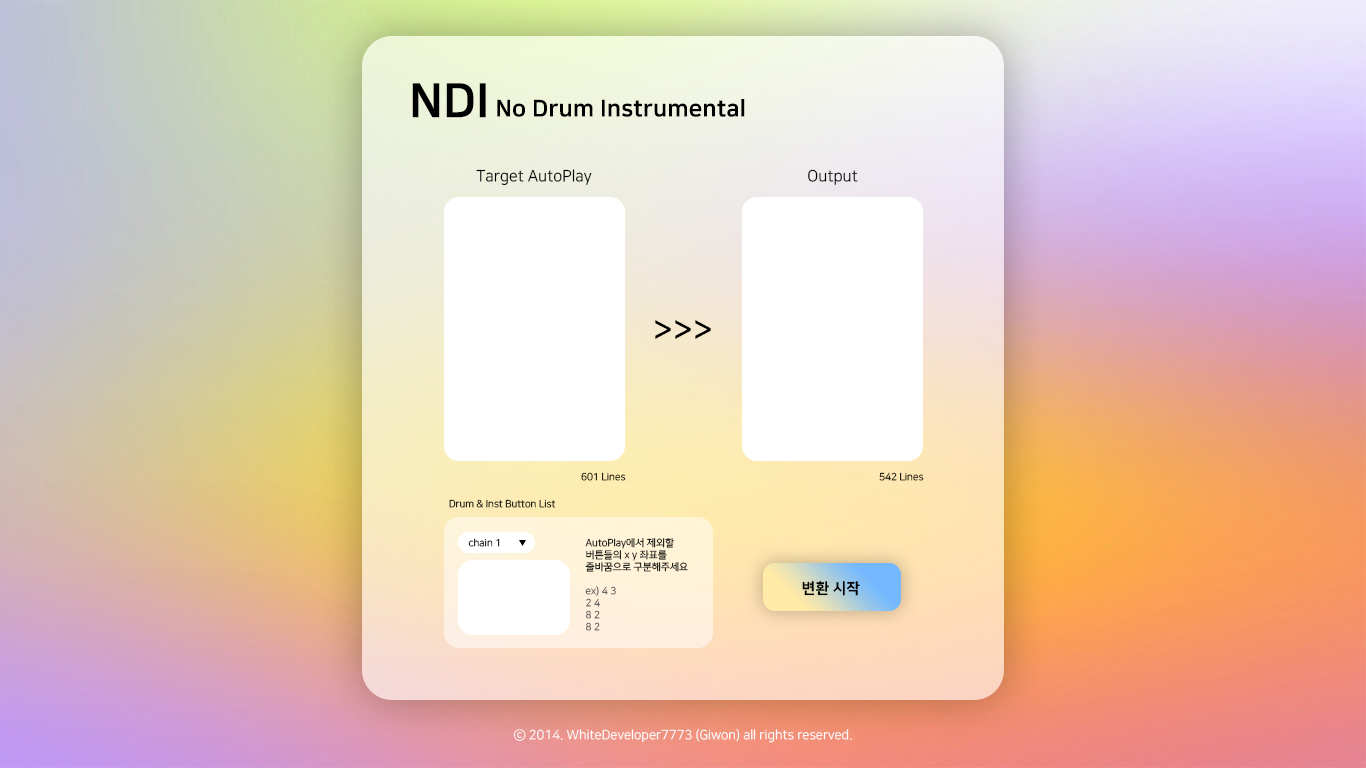
<style>
.page{position:relative;width:1366px;height:768px}
.page>*{position:absolute;margin:0}
.t1{font:23.2px "NanumSquareEB";color:#000000}
.t2{font:47.2px "NanumSquareEB";color:#000000}
.t3{font:15.8px "NanumSquareR";color:#000000}
.t4{font:32.8px "NanumSquareB";color:#000000}
.t5{font:10px "NanumSquareR"}
.t6{font:10px "NanumSquareR";color:#585858}
.t7{font:14.9px "NanumSquareEB";color:#000000}
.t8{font:13px "NanumSquareR";color:#ffffff}
</style>
<div class="page">
<p class="t1" style="left:412px;top:83px;width:333px;height:35px"><span class="t2">NDI</span> No Drum Instrumental</p>
<p class="t3" style="left:476px;top:169px;width:116px;height:17px">Target AutoPlay</p>
<p class="t3" style="left:808px;top:169px;width:50px;height:16px">Output</p>
<p class="t4" style="left:655px;top:320px;width:56px;height:19px">&gt;&gt;&gt;</p>
<p class="t5" style="left:581px;top:472px;width:45px;height:9px">601 Lines</p>
<p class="t5" style="left:879px;top:472px;width:45px;height:9px">542 Lines</p>
<p class="t5" style="left:449px;top:499px;width:107px;height:9px">Drum &amp; Inst Button List</p>
<p class="t5" style="left:468px;top:538px;width:32px;height:9px">chain 1</p>
<p class="t6" style="left:585px;top:538px;width:103px;height:93px">AutoPlay에서 제외할 버튼들의 x y 좌표를 줄바꿈으로 구분해주세요<br><br>ex) 4 3<br>2 4<br>8 2<br>8 2</p>
<p class="t7" style="left:802px;top:581px;width:58px;height:15px">변환 시작</p>
<p class="t8" style="left:513px;top:728px;width:339px;height:15px">ⓒ 2014. WhiteDeveloper7773 (Giwon) all rights reserved.</p>
</div>
